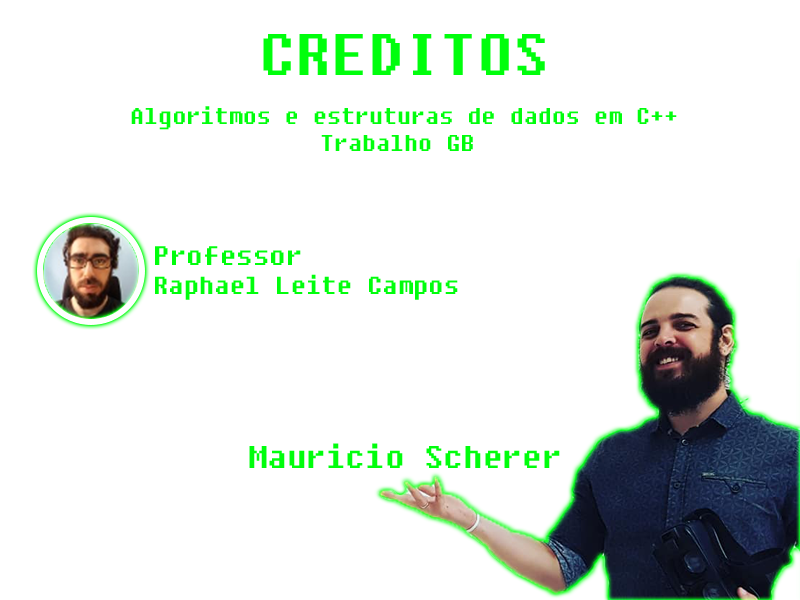
<style>
.page{position:relative;width:800px;height:600px;background:#ffffff}
.page>*{position:absolute;margin:0}
.t1{font:58.5px "Fixedsys";color:#00fe0c}
.t2{font:22.7px "Fixedsys";color:#00fe0c}
.t3{font:26.7px "Fixedsys";color:#00fe0c}
.t4{font:24.5px "Fixedsys";color:#00fe0c}
.t5{font:31.4px "Fixedsys";color:#00fe0c}
</style>
<div class="page">
<p class="t1" style="left:263px;top:34px;width:282px;height:41px">CREDITOS</p>
<p class="t2" style="left:131px;top:106px;width:546px;height:45px;text-align:center">Algoritmos e estruturas de dados em C++<br>Trabalho GB</p>
<p class="t3" style="left:155px;top:246px;width:146px;height:19px">Professor</p>
<p class="t4" style="left:155px;top:274px;width:303px;height:26px">Raphael Leite Campos</p>
<p class="t5" style="left:249px;top:443px;width:311px;height:25px">Mauricio Scherer</p>
</div>
